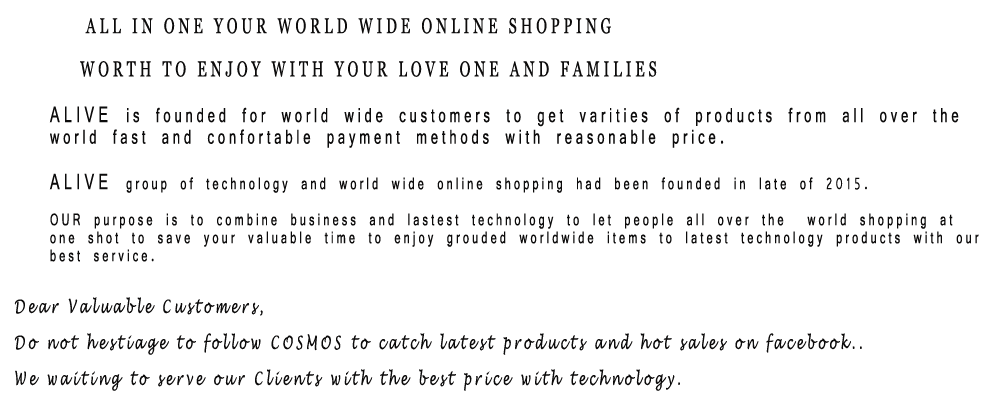
<style>
.page{position:relative;width:998px;height:400px;background:#ffffff}
.page>*{position:absolute;margin:0}
.t1{font:18px "Vrinda";letter-spacing:0.27em;color:#0c0b0b;scale:0.67 1}
.t2{font:21.6px "Vrinda";letter-spacing:0.27em;color:#0c0b0b;text-transform:uppercase;scale:0.67 1}
.t3{font:21.6px "Georgia";letter-spacing:0.27em;color:#0c0b0b;text-transform:uppercase;scale:0.67 1}
.t4{font:24px "Vrinda";letter-spacing:0.27em;color:#0c0b0b;text-transform:uppercase;scale:0.67 1}
.t5{font:21.6px "Vrinda";letter-spacing:0.27em;color:#0c0b0b;scale:0.67 1}
.t6{font:18px "Vrinda";letter-spacing:0.27em;color:#0c0b0b;text-transform:uppercase;scale:0.67 1}
.t7{font:18px "LucidaHandwriting-Italic";letter-spacing:0.27em;color:#0c0b0b;scale:0.67 1}
</style>
<div class="page">
<p class="t1" style="left:14px;top:17px;width:965px;height:374px"><span class="t2">  </span><span class="t3">all in one your world wide online shopping<br> <br>         Worth to enjoy with your love one and families<br><br></span><span class="t4"> ALIVE </span><span class="t5">is founded for world wide customers to get varities of products from all over the <br> world fast and confortable payment methods with reasonable price.<br><br></span><span class="t4"> ALIVE </span>group of technology and world wide online shopping had been founded in late of 2015.<br> <br><span class="t6"> our </span>purpose is to combine business and lastest technology to let people all over the  world shopping at <br> one shot to save your valuable time to enjoy grouded worldwide items to latest technology products with our<br> best service.<br>  <br><br><span class="t7">Dear Valuable Customers,<br> <br>Do not hestiage to follow COSMOS to catch latest products and hot sales on facebook..<br><br>We waiting to serve our Clients with the best price with technology.</span></p>
</div>
